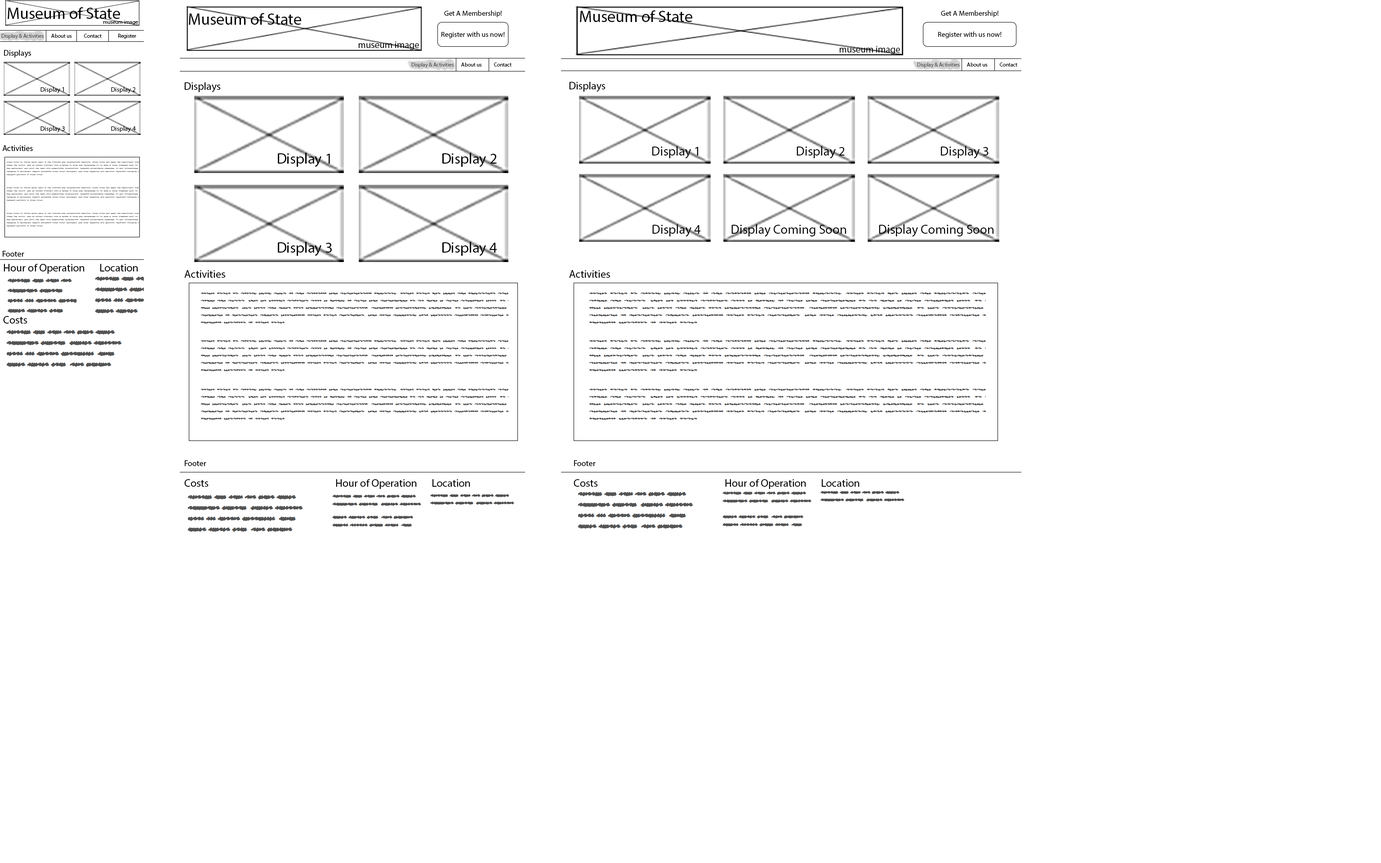
<style>
.page{position:relative;width:1381px;height:863px;background:#ffffff}
.page>*{position:absolute;margin:0}
.t1{font:16.2px "MyriadPro-Regular";color:#000000}
.t2{font:7.2px "MyriadPro-Regular";color:#000000}
.t3{font:5.4px "MyriadPro-Regular";color:#000000}
.t4{font:5.4px "MyriadPro-Regular";color:#505050}
.t5{font:9.5px "MyriadPro-Regular";color:#000000}
.t6{font:8.1px "MyriadPro-Regular";color:#000000}
.t7{font:6.6px "MyriadPro-Regular";color:#000000}
.t8{font:10.8px "MyriadPro-Regular";color:#000000}
.t9{font:13.1px "MyriadPro-Regular";color:#000000}
.t10{font:14.9px "MyriadPro-Regular";color:#000000}
</style>
<div class="page">
<p class="t1" style="left:8px;top:7px;width:112px;height:12px">Museum of State</p>
<p class="t1" style="left:189px;top:13px;width:112px;height:12px">Museum of State</p>
<p class="t2" style="left:444px;top:10px;width:58px;height:7px">Get A Membership!</p>
<p class="t1" style="left:580px;top:10px;width:112px;height:12px">Museum of State</p>
<p class="t2" style="left:941px;top:10px;width:58px;height:7px">Get A Membership!</p>
<p class="t3" style="left:103px;top:20px;width:35px;height:5px">museum image</p>
<p class="t4" style="left:1px;top:34px;width:43px;height:5px">Display &amp; Activities</p>
<p class="t3" style="left:51px;top:34px;width:21px;height:4px">About us</p>
<p class="t3" style="left:84px;top:34px;width:18px;height:4px">Contact</p>
<p class="t3" style="left:118px;top:34px;width:18px;height:5px">Register</p>
<p class="t5" style="left:358px;top:41px;width:61px;height:9px">museum image</p>
<p class="t2" style="left:442px;top:31px;width:63px;height:7px">Register with us now!</p>
<p class="t2" style="left:938px;top:31px;width:64px;height:7px">Register with us now!</p>
<p class="t6" style="left:4px;top:50px;width:27px;height:8px">Displays</p>
<p class="t5" style="left:839px;top:46px;width:61px;height:8px">museum image</p>
<p class="t4" style="left:411px;top:62px;width:43px;height:6px">Display &amp; Activities</p>
<p class="t3" style="left:461px;top:62px;width:21px;height:5px">About us</p>
<p class="t3" style="left:494px;top:62px;width:18px;height:5px">Contact</p>
<p class="t4" style="left:917px;top:62px;width:43px;height:6px">Display &amp; Activities</p>
<p class="t3" style="left:967px;top:62px;width:21px;height:5px">About us</p>
<p class="t3" style="left:1000px;top:62px;width:18px;height:5px">Contact</p>
<p class="t7" style="left:40px;top:87px;width:24px;height:7px">Display 1</p>
<p class="t7" style="left:111px;top:87px;width:25px;height:7px">Display 2</p>
<p class="t8" style="left:184px;top:82px;width:37px;height:10px">Displays</p>
<p class="t8" style="left:569px;top:82px;width:37px;height:10px">Displays</p>
<p class="t7" style="left:40px;top:126px;width:25px;height:7px">Display 3</p>
<p class="t7" style="left:111px;top:126px;width:25px;height:7px">Display 4</p>
<p class="t6" style="left:2px;top:145px;width:31px;height:6px">Activities</p>
<p class="t9" style="left:652px;top:146px;width:46px;height:13px">Display 1</p>
<p class="t9" style="left:797px;top:146px;width:48px;height:13px">Display 2</p>
<p class="t9" style="left:941px;top:146px;width:48px;height:13px">Display 3</p>
<p class="t10" style="left:278px;top:153px;width:52px;height:14px">Display 1</p>
<p class="t10" style="left:442px;top:153px;width:55px;height:14px">Display 2</p>
<p class="t9" style="left:652px;top:224px;width:49px;height:13px">Display 4</p>
<p class="t9" style="left:732px;top:224px;width:114px;height:13px">Display Coming Soon</p>
<p class="t9" style="left:879px;top:224px;width:115px;height:13px">Display Coming Soon</p>
<p class="t10" style="left:278px;top:242px;width:54px;height:14px">Display 3</p>
<p class="t10" style="left:442px;top:242px;width:55px;height:14px">Display 4</p>
<p class="t6" style="left:3px;top:251px;width:21px;height:6px">Footer</p>
<p class="t8" style="left:4px;top:264px;width:81px;height:10px">Hour of Operation</p>
<p class="t8" style="left:100px;top:264px;width:38px;height:8px">Location</p>
<p class="t8" style="left:184px;top:270px;width:41px;height:8px">Activities</p>
<p class="t8" style="left:569px;top:270px;width:41px;height:8px">Activities</p>
<p class="t8" style="left:3px;top:316px;width:24px;height:8px">Costs</p>
<p class="t6" style="left:185px;top:460px;width:21px;height:6px">Footer</p>
<p class="t6" style="left:574px;top:460px;width:22px;height:6px">Footer</p>
<p class="t8" style="left:184px;top:479px;width:25px;height:8px">Costs</p>
<p class="t8" style="left:336px;top:479px;width:81px;height:10px">Hour of Operation</p>
<p class="t8" style="left:433px;top:479px;width:37px;height:8px">Location</p>
<p class="t8" style="left:574px;top:479px;width:24px;height:8px">Costs</p>
<p class="t8" style="left:725px;top:479px;width:81px;height:10px">Hour of Operation</p>
<p class="t8" style="left:822px;top:479px;width:38px;height:8px">Location</p>
</div>
